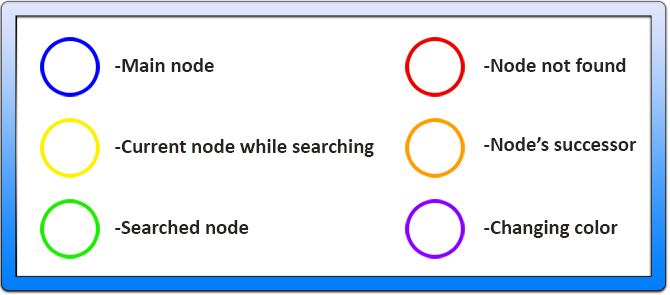
<style>
.page{position:relative;width:670px;height:295px;background:#ffffff}
.page>*{position:absolute;margin:0}
.t1{font:20.8px "Calibri-Bold";color:#2a2121}
</style>
<div class="page">
<p class="t1" style="left:115px;top:58px;width:99px;height:14px">-Main node</p>
<p class="t1" style="left:484px;top:58px;width:142px;height:14px">-Node not found</p>
<p class="t1" style="left:484px;top:137px;width:153px;height:14px">-Node’s successor</p>
<p class="t1" style="left:115px;top:139px;width:259px;height:18px">-Current node while searching</p>
<p class="t1" style="left:115px;top:220px;width:134px;height:14px">-Searched node</p>
<p class="t1" style="left:484px;top:220px;width:134px;height:18px">-Changing color</p>
</div>
